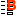
<style>
.page{position:relative;width:16px;height:16px;background:#ffffff}
.page>*{position:absolute;margin:0}
.t1{font:14px "Arial-BoldMT";color:#ff3300}
</style>
<div class="page">
<p class="t1" style="left:7px;top:0px;width:9px;height:10px">B</p>
</div>
